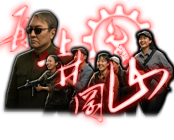
<style>
.page{position:relative;width:174px;height:140px;background:#ffffff}
.page>*{position:absolute;margin:0}
.t1{font:35.9px "²ÝÌ´Õ«Ã«Ôó¶«×ÖÌå"}
.t2{font:69px "²ÝÌ´Õ«Ã«Ôó¶«×ÖÌå"}
</style>
<div class="page">
<p class="t1" style="left:55px;top:50px;width:28px;height:37px">井</p>
<p class="t2" style="left:108px;top:56px;width:61px;height:57px">山</p>
<p class="t1" style="left:74px;top:83px;width:31px;height:40px">冈</p>
</div>
